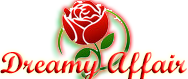
<style>
.page{position:relative;width:188px;height:79px;background:#ffffff}
.page>*{position:absolute;margin:0}
.t1{font:30.1px "ScriptMTBold"}
</style>
<div class="page">
<p class="t1" style="left:0px;top:52px;width:187px;height:29px">Dreamy Affair</p>
</div>
